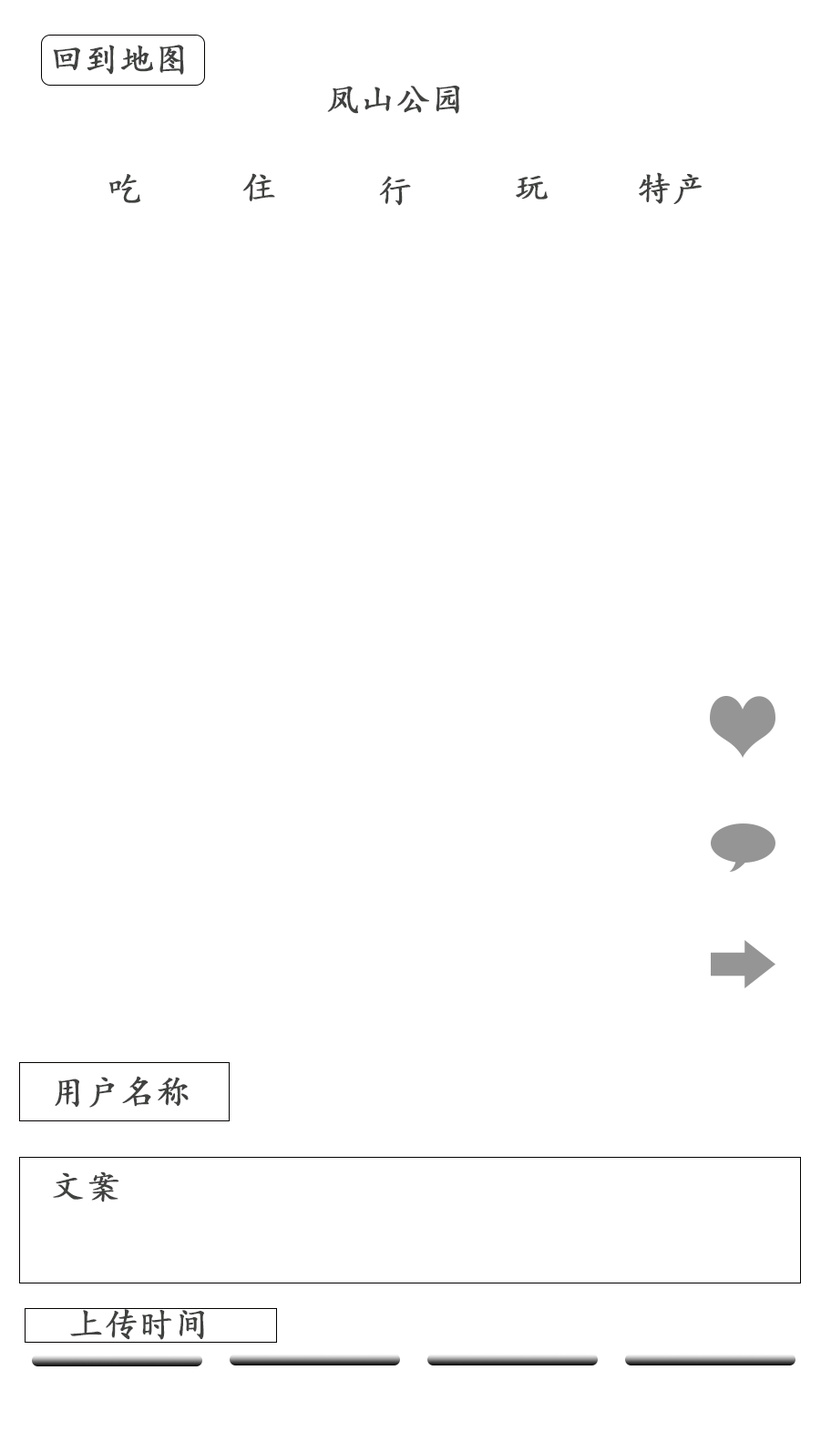
<style>
.page{position:relative;width:821px;height:1452px;background:#ffffff}
.page>*{position:absolute;margin:0}
.t1{font:34.2px "KaiTi";color:#404240;font-weight:bold}
</style>
<div class="page">
<p class="t1" style="left:53px;top:45px;width:131px;height:30px">回到地图图</p>
<p class="t1" style="left:327px;top:86px;width:133px;height:28px">凤山公园</p>
<p class="t1" style="left:242px;top:173px;width:33px;height:28px">住</p>
<p class="t1" style="left:639px;top:172px;width:63px;height:32px">特产</p>
<p class="t1" style="left:109px;top:174px;width:31px;height:29px">吃</p>
<p class="t1" style="left:379px;top:176px;width:32px;height:30px">行</p>
<p class="t1" style="left:516px;top:176px;width:32px;height:24px">玩</p>
<p class="t1" style="left:55px;top:1076px;width:134px;height:32px">用户名称</p>
<p class="t1" style="left:53px;top:1172px;width:66px;height:31px">文案</p>
<p class="t1" style="left:70px;top:1309px;width:134px;height:31px">上传时间</p>
</div>
